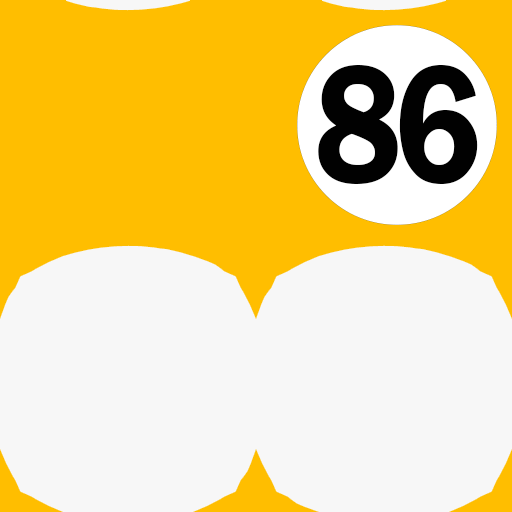
<style>
.page{position:relative;width:512px;height:512px;background:#f7f7f7}
.page>*{position:absolute;margin:0}
.t1{font:172.5px "FranklinGothic-Demi";letter-spacing:-0.05em;color:#010101;scale:0.87 1}
</style>
<div class="page">
<p class="t1" style="left:318px;top:65px;width:160px;height:119px">86</p>
</div>
